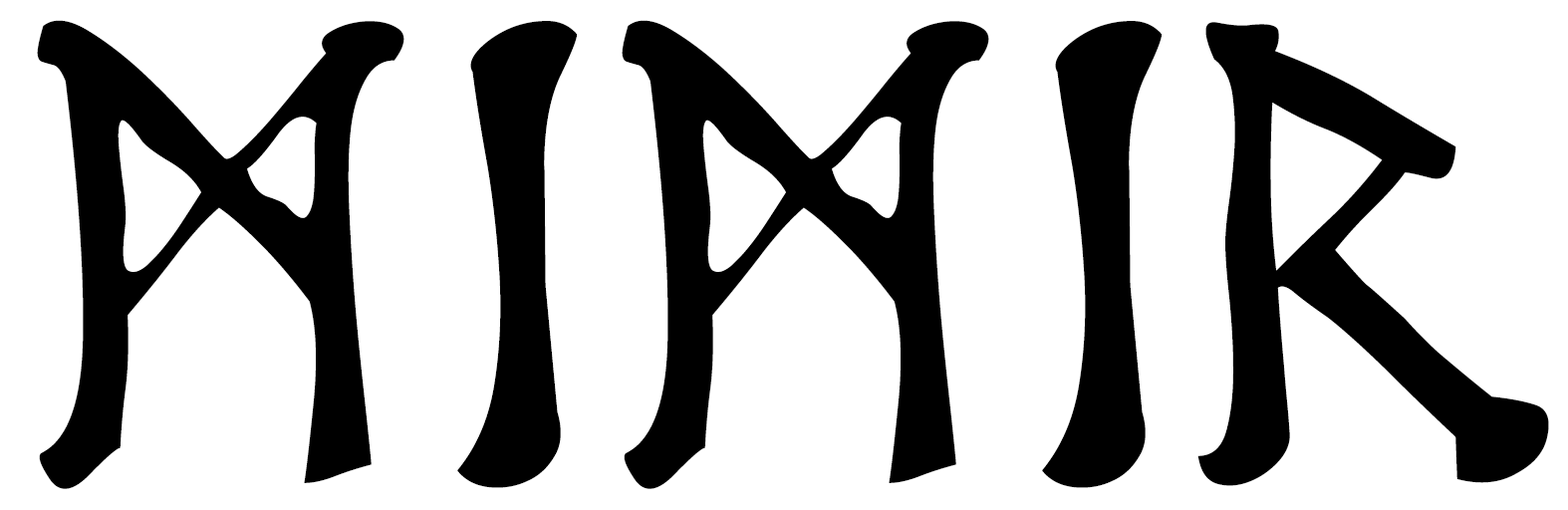
<style>
.page{position:relative;width:1568px;height:510px;background:#ffffff}
.page>*{position:absolute;margin:0}
.t1{font:539.6px "Moon-Runes-Regular";color:#000000}
</style>
<div class="page">
<p class="t1" style="left:37px;top:20px;width:1512px;height:469px">MIMIR</p>
</div>
